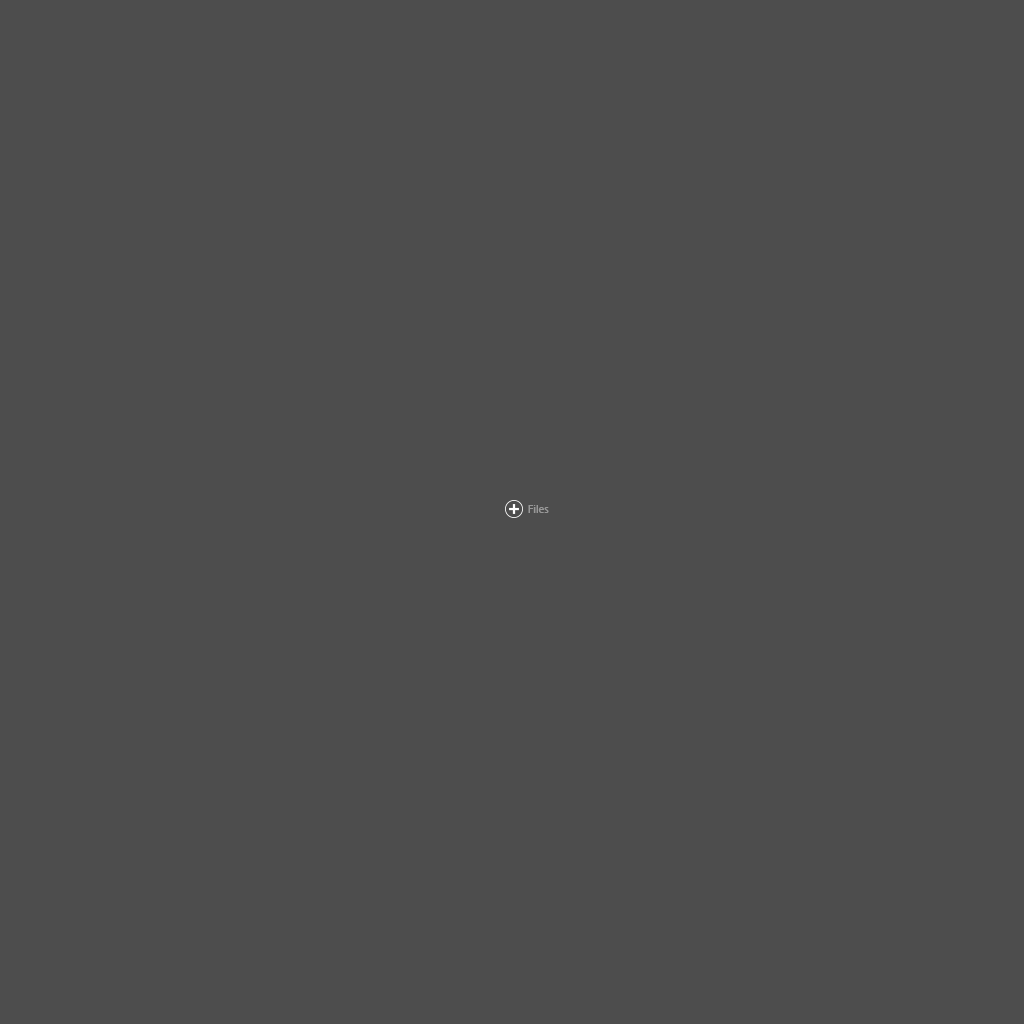
<style>
.page{position:relative;width:1024px;height:1024px;background:#4d4d4d}
.page>*{position:absolute;margin:0}
.t1{font:12px "GillSansMT";color:#979797}
</style>
<div class="page">
<p class="t1" style="left:528px;top:505px;width:21px;height:8px">Files</p>
</div>
